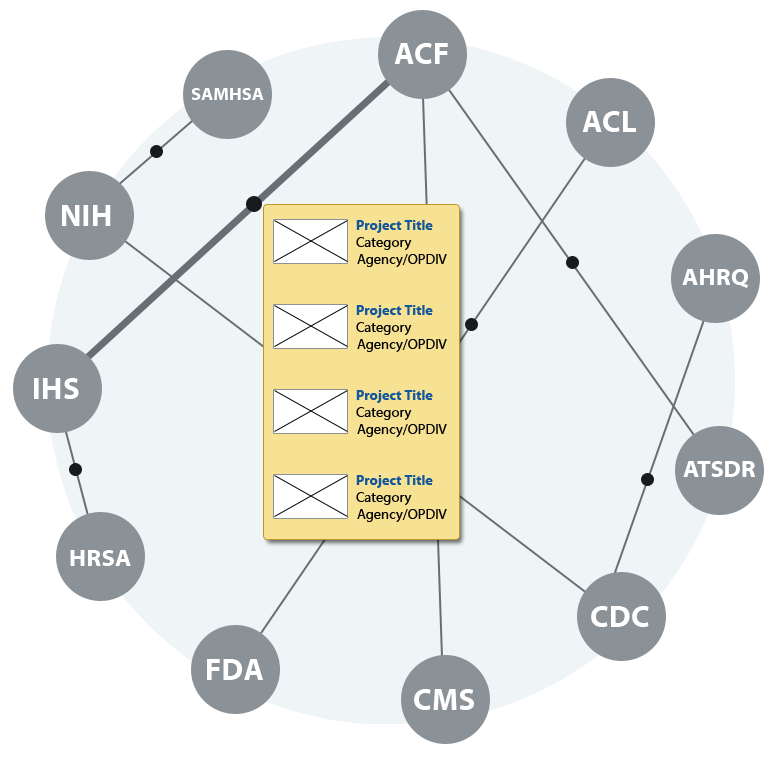
<style>
.page{position:relative;width:779px;height:758px;background:#eff4f7}
.page>*{position:absolute;margin:0}
.t1{font:30px "MyriadWebPro-Bold";letter-spacing:0.014em;color:#ffffff}
.t2{font:18px "MyriadWebPro-Bold";color:#ffffff}
.t3{font:14px "MyriadWebPro-Bold";color:#12569c}
.t4{font:14px "MyriadWebPro";color:#020202}
.t5{font:24px "MyriadWebPro-Bold";letter-spacing:0.014em;color:#ffffff}
.t6{font:24px "MyriadWebPro-Bold";color:#ffffff}
</style>
<div class="page">
<p class="t1" style="left:394px;top:43px;width:54px;height:21px">ACF</p>
<p class="t2" style="left:191px;top:88px;width:73px;height:12px">SAMHSA</p>
<p class="t1" style="left:582px;top:111px;width:54px;height:21px">ACL</p>
<p class="t1" style="left:62px;top:205px;width:49px;height:21px">NIH</p>
<p class="t3" style="left:356px;top:220px;width:77px;height:13px">Project Title</p>
<p class="t4" style="left:356px;top:237px;width:56px;height:13px">Category</p>
<p class="t4" style="left:357px;top:254px;width:90px;height:13px">Agency/OPDIV</p>
<p class="t5" style="left:682px;top:269px;width:66px;height:19px">AHRQ</p>
<p class="t3" style="left:356px;top:305px;width:77px;height:13px">Project Title</p>
<p class="t4" style="left:356px;top:322px;width:56px;height:13px">Category</p>
<p class="t4" style="left:357px;top:339px;width:90px;height:13px">Agency/OPDIV</p>
<p class="t1" style="left:34px;top:378px;width:45px;height:21px">IHS</p>
<p class="t3" style="left:356px;top:390px;width:77px;height:13px">Project Title</p>
<p class="t4" style="left:356px;top:407px;width:56px;height:13px">Category</p>
<p class="t4" style="left:357px;top:424px;width:90px;height:13px">Agency/OPDIV</p>
<p class="t6" style="left:683px;top:461px;width:72px;height:16px">ATSDR</p>
<p class="t3" style="left:356px;top:475px;width:77px;height:13px">Project Title</p>
<p class="t4" style="left:356px;top:492px;width:56px;height:13px">Category</p>
<p class="t4" style="left:357px;top:509px;width:90px;height:13px">Agency/OPDIV</p>
<p class="t5" style="left:70px;top:550px;width:61px;height:16px">HRSA</p>
<p class="t1" style="left:591px;top:606px;width:58px;height:21px">CDC</p>
<p class="t1" style="left:207px;top:659px;width:56px;height:21px">FDA</p>
<p class="t1" style="left:414px;top:689px;width:60px;height:21px">CMS</p>
</div>
